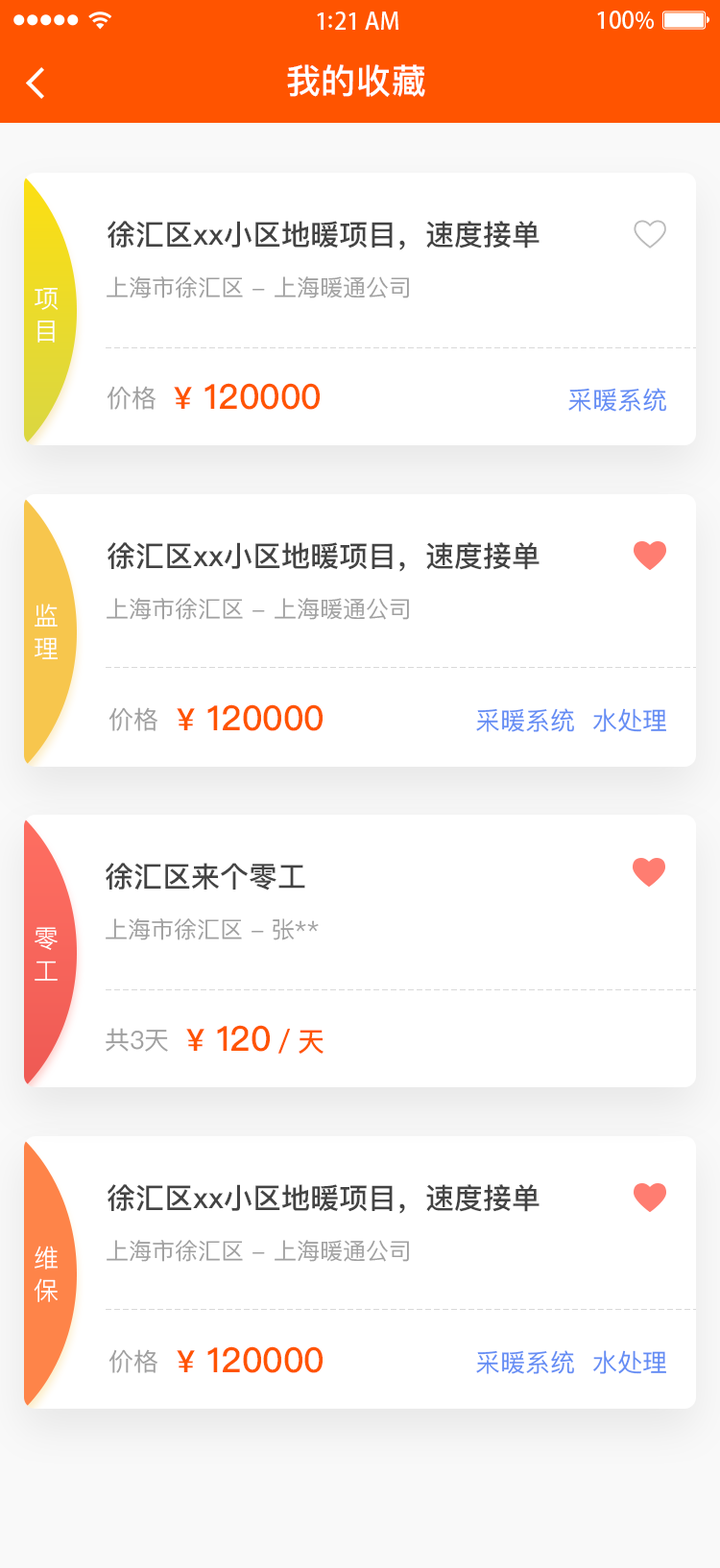
<style>
.page{position:relative;width:720px;height:1568px;background:#ffffff}
.page>*{position:absolute;margin:0}
.t1{font:34.5px "PingFangSC-Medium";letter-spacing:0.02em;color:#ffffff}
.t2{font:28.8px "PingFangSC-Medium";color:#434343}
.t3{font:23px "PingFangSC-Regular";color:#a0a0a0}
.t4{font:24.9px/7.7px "PingFangSC-Light";letter-spacing:0.34em;color:#ffffff}
.t5{font:24.9px "PingFangSC-Regular";color:#a0a0a0}
.t6{font:34.5px "PingFangSC-Medium";color:#ff5400}
.t7{font:30.7px "PingFangSC-Medium";color:#ff5400}
.t8{font:24.9px "PingFangSC-Regular";color:#648df4}
.t9{font:26.9px "PingFangSC-Medium";color:#ff5400}
</style>
<div class="page">
<p class="t1" style="left:287px;top:64px;width:138px;height:33px">我的收藏</p>
<p class="t2" style="left:107px;top:221px;width:432px;height:29px">徐汇区xx小区地暖项目，速度接单</p>
<p class="t3" style="left:107px;top:276px;width:302px;height:22px">上海市徐汇区 - 上海暖通公司</p>
<p class="t4" style="left:35px;top:288px;width:24px;height:55px;text-align:center">项目</p>
<p class="t5" style="left:107px;top:386px;width:48px;height:24px">价格</p>
<p class="t6" style="left:174px;top:383px;width:146px;height:27px"><span class="t7">¥</span> 120000</p>
<p class="t8" style="left:568px;top:388px;width:98px;height:24px">采暖系统</p>
<p class="t2" style="left:107px;top:542px;width:432px;height:30px">徐汇区xx小区地暖项目，速度接单</p>
<p class="t4" style="left:35px;top:604px;width:23px;height:55px;text-align:center">监理</p>
<p class="t3" style="left:107px;top:598px;width:302px;height:22px">上海市徐汇区 - 上海暖通公司</p>
<p class="t5" style="left:108px;top:707px;width:49px;height:24px">价格</p>
<p class="t6" style="left:177px;top:704px;width:145px;height:27px"><span class="t7">¥</span> 120000</p>
<p class="t8" style="left:476px;top:708px;width:190px;height:24px">采暖系统  水处理</p>
<p class="t2" style="left:106px;top:863px;width:199px;height:28px">徐汇区来个零工</p>
<p class="t4" style="left:35px;top:927px;width:23px;height:54px;text-align:center">零工</p>
<p class="t3" style="left:106px;top:918px;width:213px;height:22px">上海市徐汇区 - 张**</p>
<p class="t6" style="left:186px;top:1025px;width:137px;height:29px"><span class="t7">¥</span> 120<span class="t9">／天</span></p>
<p class="t5" style="left:106px;top:1028px;width:62px;height:24px">共3天</p>
<p class="t2" style="left:107px;top:1184px;width:432px;height:30px">徐汇区xx小区地暖项目，速度接单</p>
<p class="t3" style="left:107px;top:1240px;width:302px;height:22px">上海市徐汇区 - 上海暖通公司</p>
<p class="t4" style="left:34px;top:1246px;width:24px;height:56px;text-align:center">维保</p>
<p class="t5" style="left:108px;top:1349px;width:49px;height:24px">价格</p>
<p class="t6" style="left:177px;top:1346px;width:145px;height:27px"><span class="t7">¥</span> 120000</p>
<p class="t8" style="left:476px;top:1350px;width:190px;height:24px">采暖系统  水处理</p>
</div>
